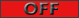
<style>
.page{position:relative;width:79px;height:18px;background:#e71515}
.page>*{position:absolute;margin:0}
.t1{font:18px "ErasITC-Bold";scale:0.96 1}
</style>
<div class="page">
<p class="t1" style="left:24px;top:2px;width:35px;height:13px">OFF</p>
</div>
